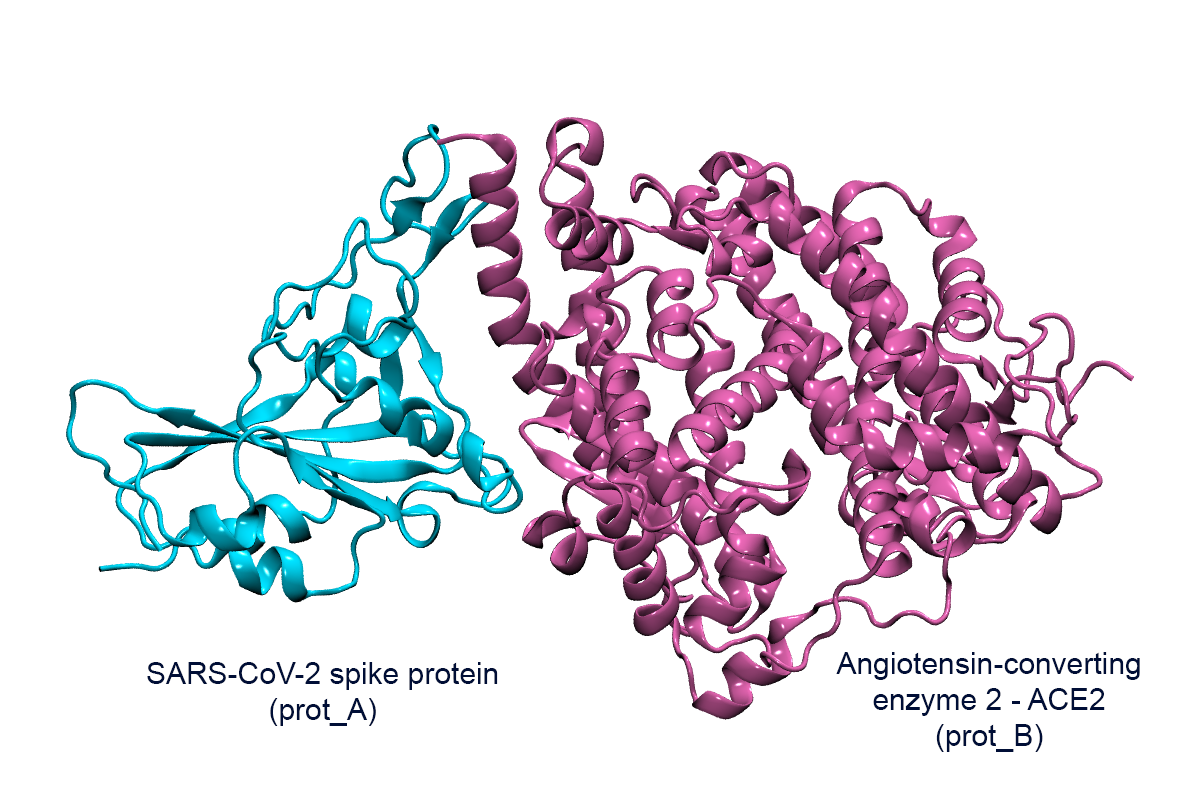
<style>
.page{position:relative;width:1199px;height:788px;background:#ffffff}
.page>*{position:absolute;margin:0}
.t1{font:30px "ArialMT";color:#000e36}
</style>
<div class="page">
<p class="t1" style="left:836px;top:652px;width:304px;height:100px;text-align:center">Angiotensin-converting enzyme 2 - ACE2<br>(prot_B)</p>
<p class="t1" style="left:147px;top:662px;width:351px;height:64px;text-align:center">SARS-CoV-2 spike protein<br>(prot_A)</p>
</div>
